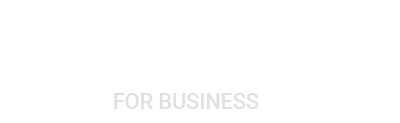
<style>
.page{position:relative;width:400px;height:123px;background:#ffffff}
.page>*{position:absolute;margin:0}
.t1{font:21.6px "Roboto-Medium";color:#e0e0e0;text-transform:uppercase}
</style>
<div class="page">
<p class="t1" style="left:114px;top:93px;width:145px;height:16px">for BUSINESS</p>
</div>
